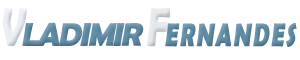
<style>
.page{position:relative;width:300px;height:60px;background:#ffffff}
.page>*{position:absolute;margin:0}
.t1{font:32.4px "BerlinSansFBDemi-Bold";letter-spacing:0.075em;color:#5d8aa3;text-transform:uppercase;font-weight:bold;font-style:italic;scale:0.7 1}
.t2{font:54px "BerlinSansFBDemi-Bold";letter-spacing:-0.1em;color:#eaeef4;text-transform:uppercase;font-weight:bold;font-style:italic;scale:0.7 1}
.t3{font:32.4px "BerlinSansFBDemi-Bold";letter-spacing:-0.075em;color:#5d8aa3;text-transform:uppercase;font-weight:bold;font-style:italic}
.t4{font:54px "BerlinSansFBDemi-Bold";letter-spacing:-0.1em;color:#e4e8ea;text-transform:uppercase;font-weight:bold;font-style:italic;scale:0.7 1}
</style>
<div class="page">
<p class="t1" style="left:2px;top:7px;width:295px;height:40px"><span class="t2">V</span><span class="t3">ladimir </span><span class="t4">F</span>ernandes</p>
</div>
